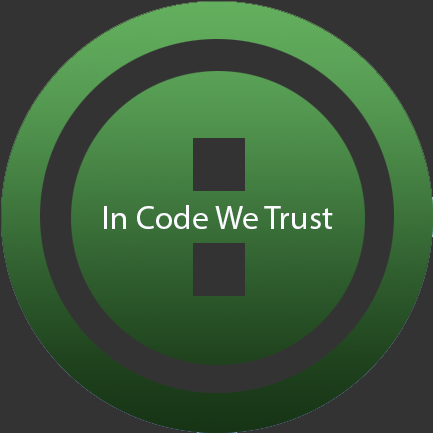
<style>
.page{position:relative;width:433px;height:433px;background:#333333}
.page>*{position:absolute;margin:0}
.t1{font:33.3px "MyriadPro-Regular";color:#fbfcff}
</style>
<div class="page">
<p class="t1" style="left:104px;top:205px;width:229px;height:24px">In Code We Trust</p>
</div>
